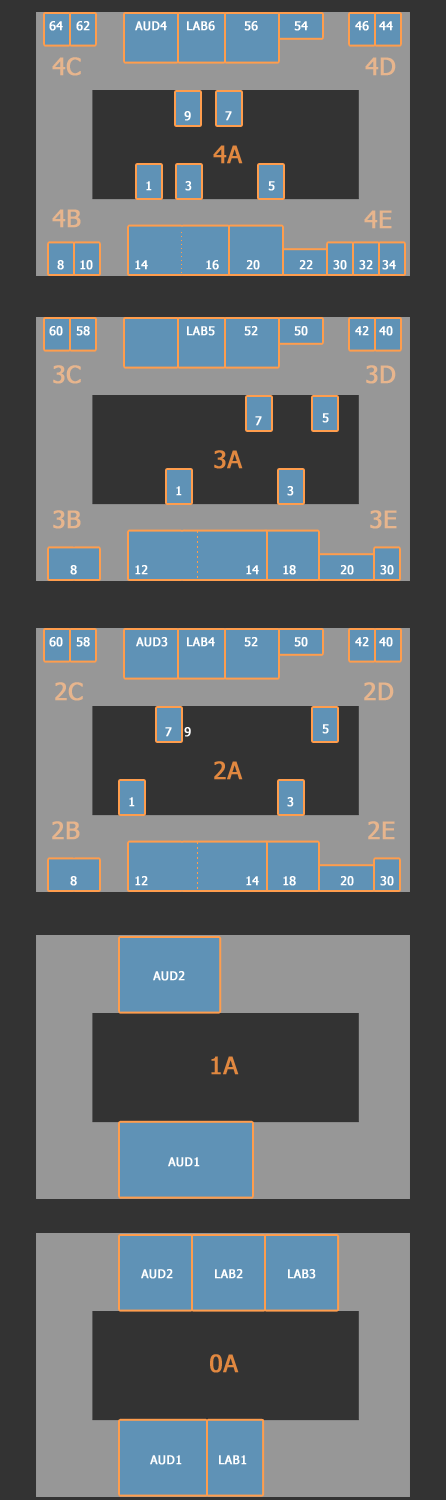
<style>
.page{position:relative;width:446px;height:1500px;background:#333333}
.page>*{position:absolute;margin:0}
.t1{font:12px "Tahoma";letter-spacing:0.02em;color:#ffffff;font-weight:bold}
.t2{font:24px "Tahoma";letter-spacing:0.02em;color:#e7b58d;font-weight:bold}
.t3{font:24px "Tahoma";letter-spacing:0.02em;color:#e18840;font-weight:bold}
</style>
<div class="page">
<p class="t1" style="left:49px;top:21px;width:14px;height:10px">64</p>
<p class="t1" style="left:76px;top:21px;width:14px;height:10px">62</p>
<p class="t1" style="left:135px;top:21px;width:32px;height:10px">AUD4</p>
<p class="t1" style="left:187px;top:21px;width:28px;height:10px">LAB6</p>
<p class="t1" style="left:244px;top:21px;width:14px;height:10px">56</p>
<p class="t1" style="left:294px;top:21px;width:14px;height:10px">54</p>
<p class="t1" style="left:355px;top:21px;width:14px;height:10px">46</p>
<p class="t1" style="left:379px;top:21px;width:14px;height:10px">44</p>
<p class="t2" style="left:52px;top:57px;width:29px;height:19px">4C</p>
<p class="t2" style="left:365px;top:57px;width:31px;height:19px">4D</p>
<p class="t1" style="left:184px;top:111px;width:7px;height:10px">9</p>
<p class="t1" style="left:225px;top:111px;width:7px;height:10px">7</p>
<p class="t3" style="left:213px;top:145px;width:30px;height:19px">4A</p>
<p class="t1" style="left:146px;top:181px;width:6px;height:10px">1</p>
<p class="t1" style="left:185px;top:181px;width:7px;height:10px">3</p>
<p class="t1" style="left:268px;top:181px;width:7px;height:10px">5</p>
<p class="t2" style="left:52px;top:209px;width:29px;height:19px">4B</p>
<p class="t2" style="left:364px;top:210px;width:28px;height:19px">4E</p>
<p class="t1" style="left:57px;top:260px;width:7px;height:10px">8</p>
<p class="t1" style="left:80px;top:260px;width:13px;height:10px">10</p>
<p class="t1" style="left:135px;top:260px;width:13px;height:10px">14</p>
<p class="t1" style="left:206px;top:260px;width:13px;height:10px">16</p>
<p class="t1" style="left:246px;top:260px;width:14px;height:10px">20</p>
<p class="t1" style="left:299px;top:260px;width:14px;height:10px">22</p>
<p class="t1" style="left:333px;top:260px;width:14px;height:10px">30</p>
<p class="t1" style="left:359px;top:260px;width:14px;height:10px">32</p>
<p class="t1" style="left:382px;top:260px;width:14px;height:10px">34</p>
<p class="t1" style="left:49px;top:326px;width:14px;height:10px">60</p>
<p class="t1" style="left:76px;top:326px;width:14px;height:10px">58</p>
<p class="t1" style="left:187px;top:326px;width:28px;height:10px">LAB5</p>
<p class="t1" style="left:244px;top:326px;width:14px;height:10px">52</p>
<p class="t1" style="left:294px;top:326px;width:14px;height:10px">50</p>
<p class="t1" style="left:355px;top:326px;width:14px;height:10px">42</p>
<p class="t1" style="left:379px;top:326px;width:14px;height:10px">40</p>
<p class="t2" style="left:53px;top:365px;width:28px;height:19px">3C</p>
<p class="t2" style="left:366px;top:365px;width:30px;height:19px">3D</p>
<p class="t1" style="left:322px;top:413px;width:7px;height:10px">5</p>
<p class="t1" style="left:255px;top:416px;width:7px;height:10px">7</p>
<p class="t3" style="left:214px;top:450px;width:29px;height:19px">3A</p>
<p class="t1" style="left:176px;top:486px;width:6px;height:10px">1</p>
<p class="t1" style="left:287px;top:486px;width:7px;height:10px">3</p>
<p class="t2" style="left:53px;top:510px;width:28px;height:19px">3B</p>
<p class="t2" style="left:370px;top:510px;width:27px;height:19px">3E</p>
<p class="t1" style="left:70px;top:565px;width:7px;height:10px">8</p>
<p class="t1" style="left:135px;top:565px;width:13px;height:10px">12</p>
<p class="t1" style="left:246px;top:565px;width:13px;height:10px">14</p>
<p class="t1" style="left:283px;top:565px;width:13px;height:10px">18</p>
<p class="t1" style="left:340px;top:565px;width:14px;height:10px">20</p>
<p class="t1" style="left:380px;top:565px;width:14px;height:10px">30</p>
<p class="t1" style="left:49px;top:637px;width:14px;height:10px">60</p>
<p class="t1" style="left:76px;top:637px;width:14px;height:10px">58</p>
<p class="t1" style="left:136px;top:637px;width:32px;height:10px">AUD3</p>
<p class="t1" style="left:187px;top:637px;width:28px;height:10px">LAB4</p>
<p class="t1" style="left:244px;top:637px;width:14px;height:10px">52</p>
<p class="t1" style="left:294px;top:637px;width:14px;height:10px">50</p>
<p class="t1" style="left:355px;top:637px;width:14px;height:10px">42</p>
<p class="t1" style="left:379px;top:637px;width:14px;height:10px">40</p>
<p class="t2" style="left:55px;top:682px;width:28px;height:19px">2C</p>
<p class="t2" style="left:364px;top:682px;width:30px;height:19px">2D</p>
<p class="t1" style="left:322px;top:724px;width:7px;height:10px">5</p>
<p class="t1" style="left:165px;top:727px;width:7px;height:10px">7</p>
<p class="t1" style="left:184px;top:727px;width:7px;height:10px">9</p>
<p class="t3" style="left:214px;top:761px;width:29px;height:19px">2A</p>
<p class="t1" style="left:129px;top:797px;width:6px;height:10px">1</p>
<p class="t1" style="left:287px;top:797px;width:7px;height:10px">3</p>
<p class="t2" style="left:52px;top:821px;width:28px;height:19px">2B</p>
<p class="t2" style="left:368px;top:821px;width:27px;height:19px">2E</p>
<p class="t1" style="left:70px;top:876px;width:7px;height:10px">8</p>
<p class="t1" style="left:135px;top:876px;width:13px;height:10px">12</p>
<p class="t1" style="left:246px;top:876px;width:13px;height:10px">14</p>
<p class="t1" style="left:283px;top:876px;width:13px;height:10px">18</p>
<p class="t1" style="left:340px;top:876px;width:14px;height:10px">20</p>
<p class="t1" style="left:380px;top:876px;width:14px;height:10px">30</p>
<p class="t1" style="left:153px;top:971px;width:32px;height:10px">AUD2</p>
<p class="t3" style="left:211px;top:1056px;width:28px;height:19px">1A</p>
<p class="t1" style="left:168px;top:1157px;width:32px;height:10px">AUD1</p>
<p class="t1" style="left:141px;top:1269px;width:32px;height:10px">AUD2</p>
<p class="t1" style="left:215px;top:1269px;width:28px;height:10px">LAB2</p>
<p class="t1" style="left:288px;top:1269px;width:28px;height:10px">LAB3</p>
<p class="t3" style="left:210px;top:1354px;width:29px;height:19px">0A</p>
<p class="t1" style="left:150px;top:1455px;width:32px;height:10px">AUD1</p>
<p class="t1" style="left:219px;top:1455px;width:28px;height:10px">LAB1</p>
</div>
